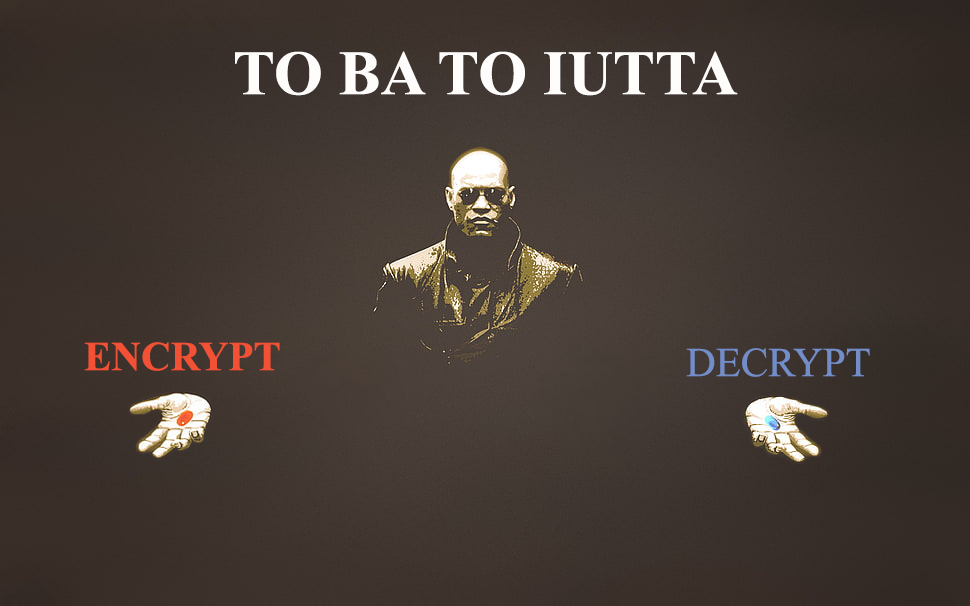
<style>
.page{position:relative;width:970px;height:606px}
.page>*{position:absolute;margin:0}
.t1{font:63px "TimesNewRomanPS-BoldMT";color:#fffcfc}
.t2{font:41px "TimesNewRomanPS-BoldMT";color:#f25135}
.t3{font:41px "TimesNewRomanPSMT";color:#738dc8}
</style>
<div class="page">
<p class="t1" style="left:235px;top:51px;width:503px;height:45px">TO BA TO IUTTA</p>
<p class="t2" style="left:84px;top:342px;width:196px;height:29px">ENCRYPT</p>
<p class="t3" style="left:686px;top:348px;width:184px;height:29px">DECRYPT</p>
</div>
